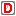
<style>
.page{position:relative;width:16px;height:16px;background:#ffffff}
.page>*{position:absolute;margin:0}
.t1{font:14px "Arial-BoldMT";color:#ff0000}
</style>
<div class="page">
<p class="t1" style="left:4px;top:3px;width:8px;height:10px">D</p>
</div>
